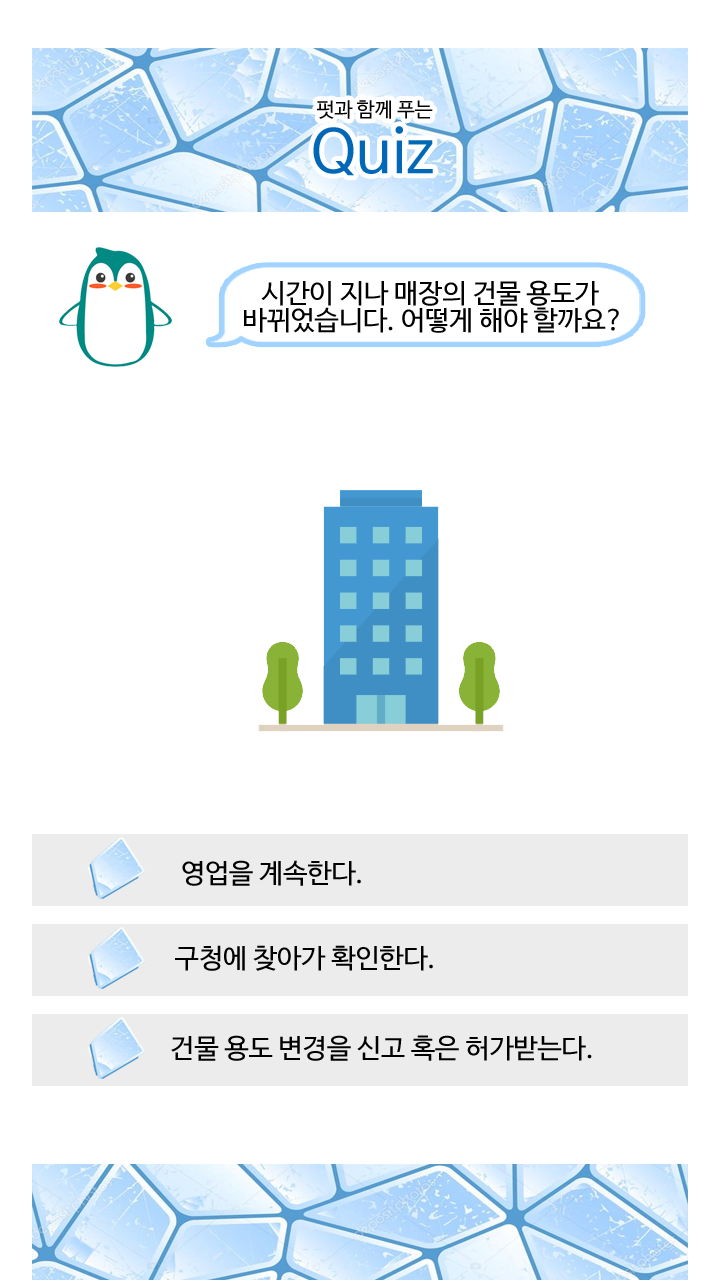
<style>
.page{position:relative;width:720px;height:1280px;background:#ffffff}
.page>*{position:absolute;margin:0}
.t1{font:20px/24px "NanumBarunGothic";color:#000000}
.t2{font:20px/26px "NanumBarunGothic";color:#000000}
.t3{font:60px/24px "NanumBarunGothic";color:#0068b7}
.t4{font:27px/27px "NanumBarunGothic";color:#000000}
.t5{font:27px "NanumBarunGothic";color:#000000}
</style>
<div class="page">
<p class="t1" style="left:313px;top:100px;width:120px;height:76px;text-align:center"><span class="t2">  </span>펏과 함께 푸는 <br><span class="t3">Quiz</span></p>
<p class="t4" style="left:244px;top:280px;width:375px;height:53px;text-align:center">시간이 지나 매장의 건물 용도가 <br>바뀌었습니다. 어떻게 해야 할까요?</p>
<p class="t5" style="left:182px;top:860px;width:179px;height:26px">영업을 계속한다.</p>
<p class="t5" style="left:175px;top:945px;width:258px;height:26px">구청에 찾아가 확인한다.</p>
<p class="t5" style="left:171px;top:1035px;width:421px;height:26px">건물 용도 변경을 신고 혹은 허가받는다.</p>
</div>
